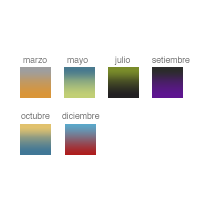
<style>
.page{position:relative;width:200px;height:200px;background:#ffffff}
.page>*{position:absolute;margin:0}
.t1{font:9px "Helvetica";color:#686868;scale:0.96 1}
.t2{font:9px "Helvetica";scale:0.96 1}
</style>
<div class="page">
<p class="t1" style="left:23px;top:58px;width:24px;height:5px">marzo</p>
<p class="t2" style="left:67px;top:58px;width:21px;height:7px">mayo</p>
<p class="t2" style="left:114px;top:56px;width:16px;height:9px">julio</p>
<p class="t2" style="left:152px;top:56px;width:38px;height:7px">setiembre</p>
<p class="t2" style="left:21px;top:112px;width:29px;height:7px">octubre</p>
<p class="t2" style="left:62px;top:112px;width:38px;height:7px">diciembre</p>
</div>
